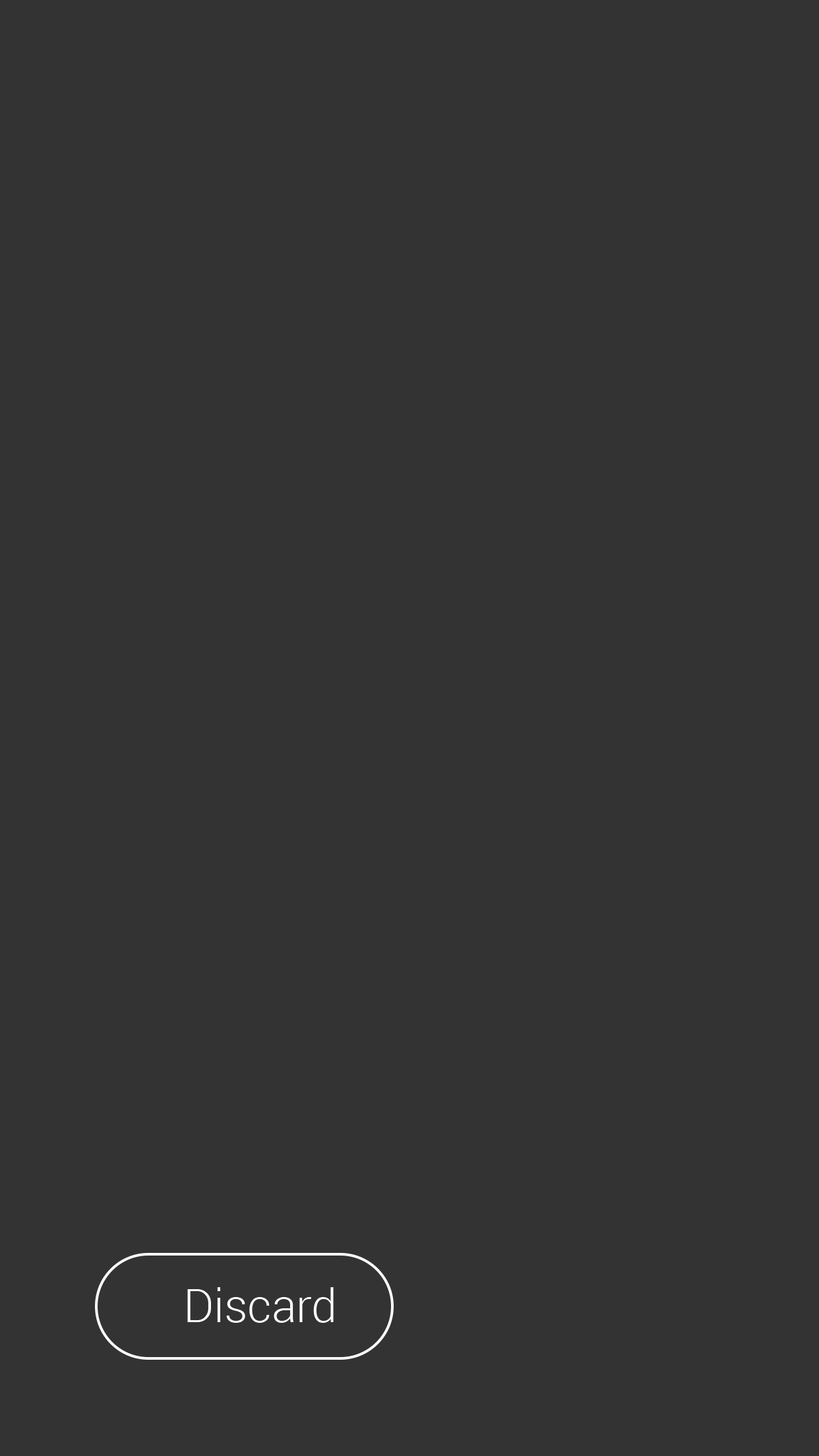
<style>
.page{position:relative;width:819px;height:1456px;background:#333333}
.page>*{position:absolute;margin:0}
.t1{font:46.2px "Roboto-Light";color:#ffffff}
</style>
<div class="page">
<p class="t1" style="left:187px;top:1287px;width:147px;height:36px">Discard</p>
</div>
